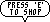
<style>
.page{position:relative;width:50px;height:22px;background:#ffffff}
.page>*{position:absolute;margin:0}
.t1{font:15px/7px "Pixelrom";letter-spacing:0.025em;color:#000000}
</style>
<div class="page">
<p class="t1" style="left:8px;top:2px;width:35px;height:13px;text-align:center">PRESS 'E'<br>TO SHOP</p>
</div>
